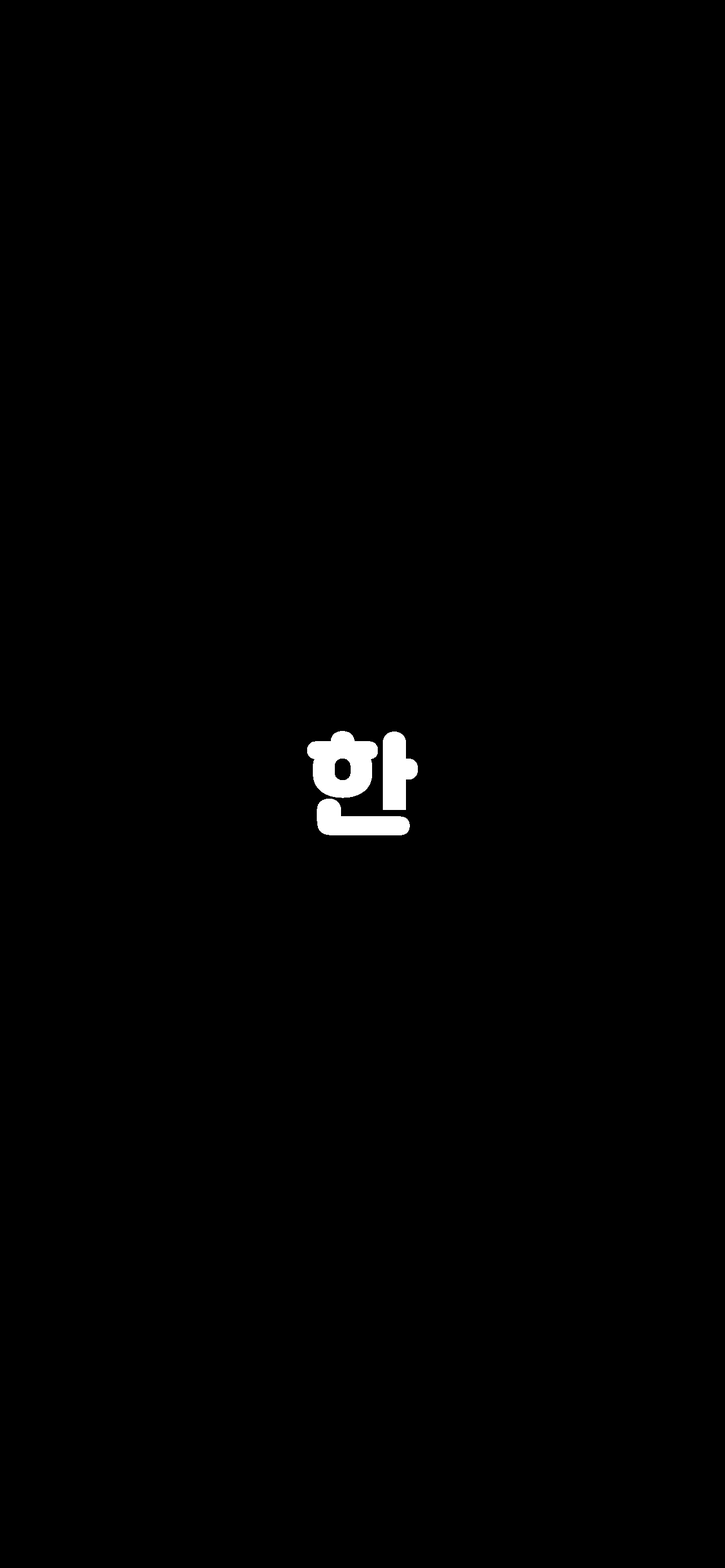
<style>
.page{position:relative;width:725px;height:1568px;background:#000000}
.page>*{position:absolute;margin:0}
.t1{font:108.1px "JalnanOTF";color:#ffffff;font-weight:bold}
</style>
<div class="page">
<p class="t1" style="left:307px;top:731px;width:111px;height:104px">한</p>
</div>
